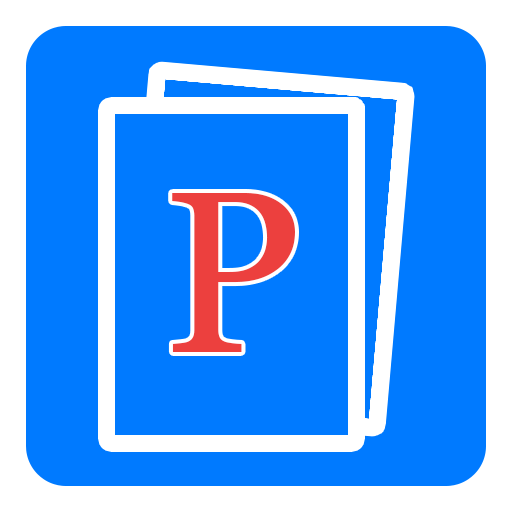
<style>
.page{position:relative;width:512px;height:512px;background:#007aff}
.page>*{position:absolute;margin:0}
.t1{font:230px "Georgia";color:#ec403e}
</style>
<div class="page">
<p class="t1" style="left:172px;top:193px;width:123px;height:159px">P</p>
</div>
